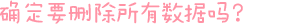
<style>
.page{position:relative;width:302px;height:24px;background:#ffffff}
.page>*{position:absolute;margin:0}
.t1{font:26px "¢è?";color:#ff93a5}
</style>
<div class="page">
<p class="t1" style="left:0px;top:0px;width:243px;height:24px">确定要删除所有数据吗？</p>
</div>
